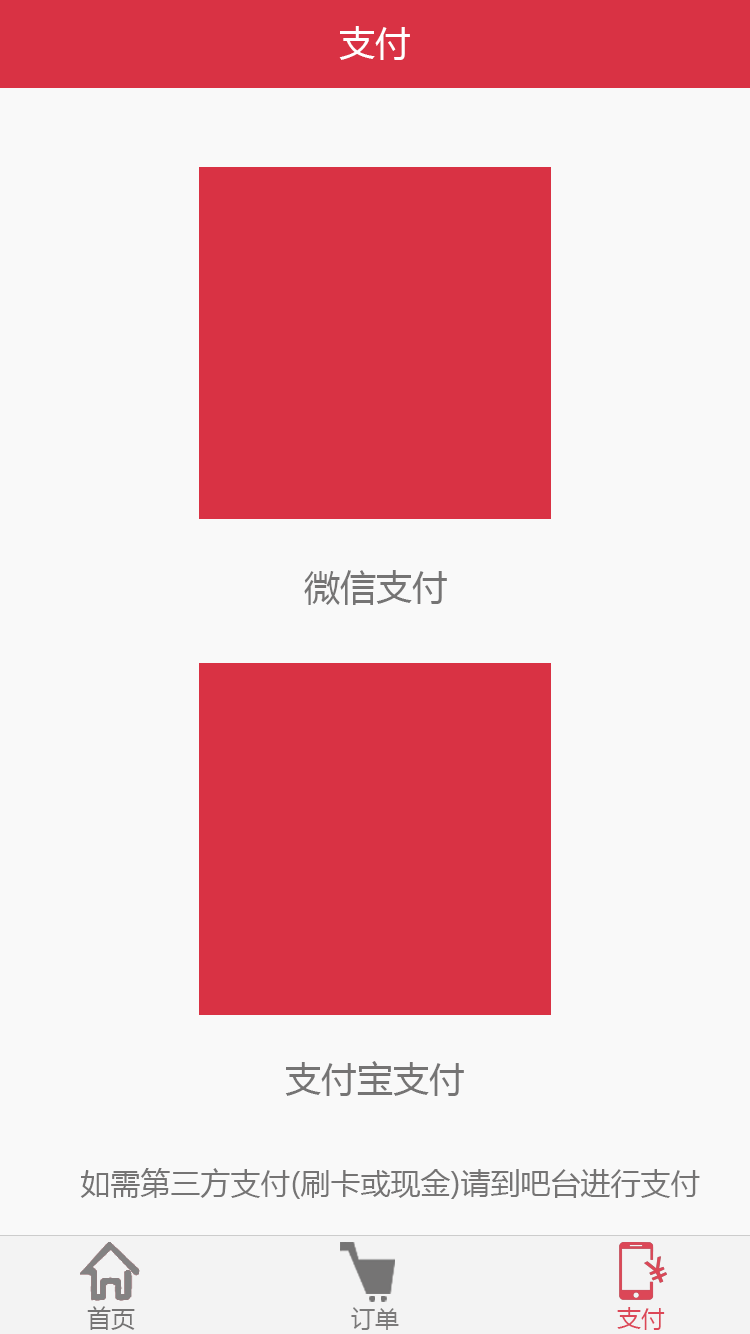
<style>
.page{position:relative;width:750px;height:1334px;background:#f9f9f9}
.page>*{position:absolute;margin:0}
.t1{font:36px "MicrosoftYaHei";color:#ffffff}
.t2{font:36px "MicrosoftYaHei";color:#757474}
.t3{font:30px "MicrosoftYaHei";color:#757474}
.t4{font:24px "MicrosoftYaHei";color:#757474}
.t5{font:24px "MicrosoftYaHei";color:#7b7a7a}
.t6{font:24px "MicrosoftYaHei";color:#dc4757}
</style>
<div class="page">
<p class="t1" style="left:339px;top:26px;width:71px;height:34px">支付</p>
<p class="t2" style="left:304px;top:570px;width:143px;height:35px">微信支付</p>
<p class="t2" style="left:285px;top:1061px;width:179px;height:35px">支付宝支付</p>
<p class="t3" style="left:80px;top:1168px;width:620px;height:31px">如需第三方支付(刷卡或现金)请到吧台进行支付</p>
<p class="t4" style="left:87px;top:1306px;width:48px;height:24px">首页</p>
<p class="t5" style="left:351px;top:1307px;width:48px;height:23px">订单</p>
<p class="t6" style="left:617px;top:1307px;width:48px;height:23px">支付</p>
</div>
